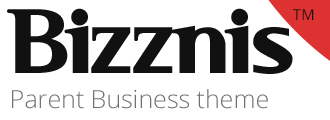
<style>
.page{position:relative;width:330px;height:120px;background:#ffffff}
.page>*{position:absolute;margin:0}
.t1{font:100px "SerifBlack";letter-spacing:0.025em;color:#111111}
.t2{font:15px "OpenSans";letter-spacing:0.025em;color:#111111}
.t3{font:25px "OpenSans-Light";color:#707070}
</style>
<div class="page">
<p class="t1" style="left:7px;top:8px;width:286px;height:66px">Bizznis</p>
<p class="t2" style="left:293px;top:9px;width:21px;height:11px">TM</p>
<p class="t3" style="left:12px;top:89px;width:256px;height:20px">Parent Business theme</p>
</div>
